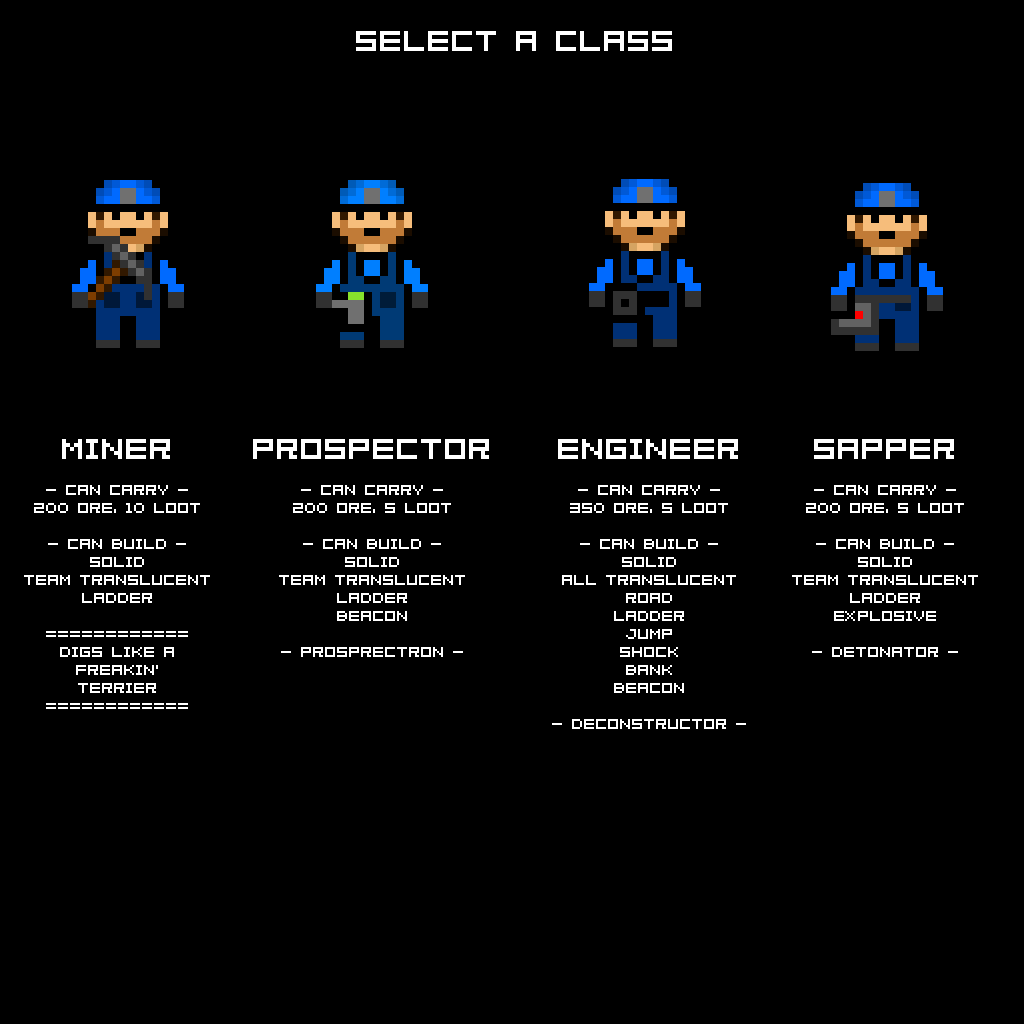
<style>
.page{position:relative;width:1024px;height:1024px;background:#000000}
.page>*{position:absolute;margin:0}
.t1{font:32px "04b08";color:#ffffff}
.t2{font:16px/18px "04b08";color:#ffffff}
.t3{font:32px/18px "04b08";color:#ffffff}
</style>
<div class="page">
<p class="t1" style="left:356px;top:31px;width:316px;height:20px">SELECT A CLASS</p>
<p class="t2" style="left:24px;top:439px;width:186px;height:270px;text-align:center"><span class="t3">MINER<br><br></span>- CAN CARRY -<br>200 ORE, 10 LOOT<br><br>- CAN BUILD -<br>SOLID<br>TEAM translucent<br>ladder<br><br>============<br>DIGS LIKE A<br>FREAKIN'<br>TERRIER<br>============</p>
<p class="t2" style="left:253px;top:439px;width:236px;height:218px;text-align:center"><span class="t3">PROSPECTOR<br><br></span>- CAN CARRY -<br>200 ORE, 5 LOOT<br><br>- CAN BUILD -<br>SOLID<br>TEAM translucent<br>ladder<br>BEACON<br><br>- PROSPRECTRON -</p>
<p class="t2" style="left:552px;top:439px;width:194px;height:290px;text-align:center"><span class="t3">ENGINEER<br><br></span>- CAN CARRY -<br>350 ORE, 5 LOOT<br><br>- CAN BUILD -<br>SOLID<br>ALL translucent<br>ROAD<br>ladder<br>JUMP<br>SHOCK<br>BANK<br>BEACON<br><br>- DECONSTRUCTOR -</p>
<p class="t2" style="left:792px;top:439px;width:186px;height:218px;text-align:center"><span class="t3">SAPPER<br><br></span>- CAN CARRY -<br>200 ORE, 5 LOOT<br><br>- CAN BUILD -<br>SOLID<br>TEAM translucent<br>ladder<br>EXPLOSIVE<br><br>- DETONATOR -</p>
</div>
